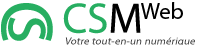
<style>
.page{position:relative;width:211px;height:45px;background:#ffffff}
.page>*{position:absolute;margin:0}
.t1{font:74.7px "MyriadPro-Regular";color:#27ae61}
.t2{font:42.8px "MyriadPro-Regular";color:#27ae61}
.t3{font:42.8px "MyriadPro-Regular";color:#000000}
.t4{font:23px "MyriadPro-Regular";color:#000000}
.t5{font:10.1px "MyriadPro-Regular";letter-spacing:0.01em;color:#404040;font-style:italic;scale:1.07 1}
</style>
<div class="page">
<p class="t1" style="left:1px;top:3px;width:52px;height:38px;rotate:90deg">C</p>
<p class="t2" style="left:63px;top:3px;width:78px;height:31px">CS<span class="t3">M</span></p>
<p class="t4" style="left:141px;top:2px;width:42px;height:17px">Web</p>
<p class="t1" style="left:8px;top:17px;width:38px;height:24px;rotate:90deg">s</p>
<p class="t5" style="left:65px;top:37px;width:130px;height:10px">Votre tout-en-un numérique</p>
</div>
